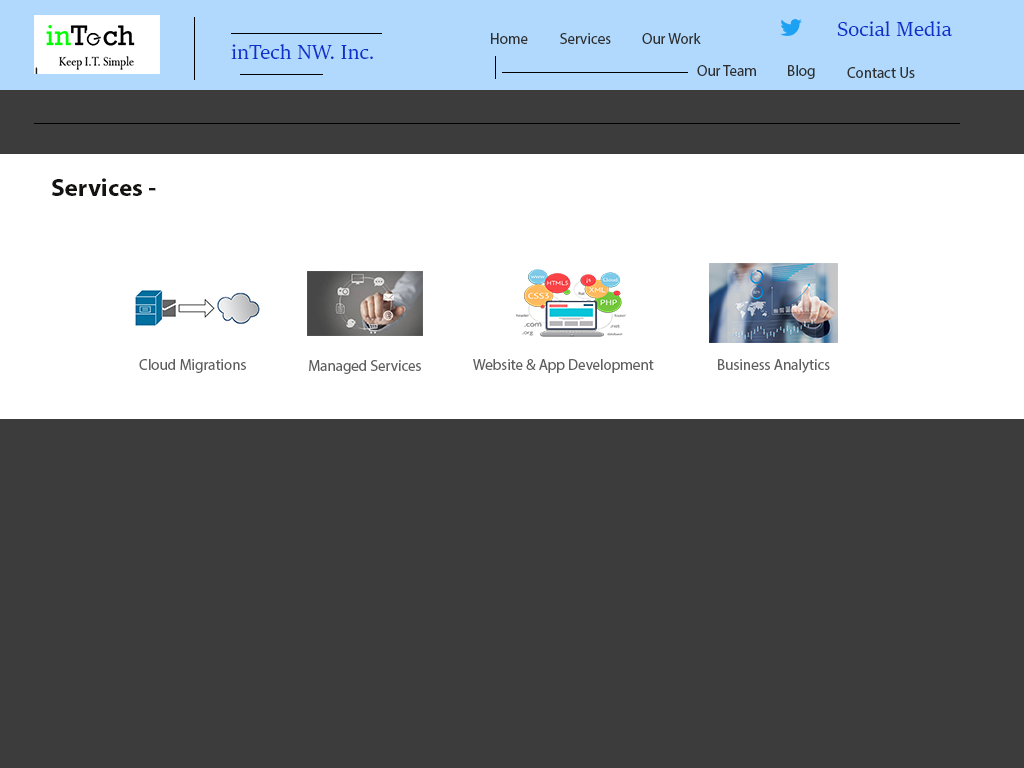
<style>
.page{position:relative;width:1024px;height:768px;background:#3c3c3c}
.page>*{position:absolute;margin:0}
.t1{font:22px "SitkaHeading";color:#0d31c9}
.t2{font:15px "MyriadPro-Regular";color:#2f2f2f}
.t3{font:25px "MyriadPro-Bold";color:#151212}
.t4{font:15px "MyriadPro-Regular";color:#5f5f5f}
</style>
<div class="page">
<p class="t1" style="left:837px;top:21px;width:115px;height:15px">Social Media</p>
<p class="t2" style="left:491px;top:33px;width:37px;height:11px">Home</p>
<p class="t2" style="left:560px;top:33px;width:51px;height:11px">Services</p>
<p class="t2" style="left:642px;top:33px;width:59px;height:11px">Our Work</p>
<p class="t1" style="left:231px;top:44px;width:142px;height:15px">inTech NW. Inc.</p>
<p class="t2" style="left:697px;top:65px;width:59px;height:11px">Our Team</p>
<p class="t2" style="left:788px;top:65px;width:27px;height:14px">Blog</p>
<p class="t2" style="left:847px;top:67px;width:68px;height:11px">Contact Us</p>
<p class="t3" style="left:52px;top:178px;width:104px;height:18px">Services -</p>
<p class="t4" style="left:139px;top:359px;width:107px;height:14px">Cloud Migrations</p>
<p class="t4" style="left:309px;top:360px;width:112px;height:14px">Managed Services</p>
<p class="t4" style="left:473px;top:359px;width:181px;height:14px">Website &amp; App Development</p>
<p class="t4" style="left:718px;top:359px;width:112px;height:14px">Business Analytics</p>
</div>
